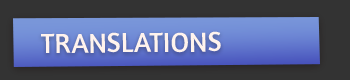
<style>
.page{position:relative;width:350px;height:80px;background:#333333}
.page>*{position:absolute;margin:0}
.t1{font:28px "Amaranth-Regular";color:#fff3ed;font-variant:small-caps}
</style>
<div class="page">
<p class="t1" style="left:41px;top:31px;width:180px;height:22px;rotate:-1deg">TRANSLATIONS</p>
</div>
